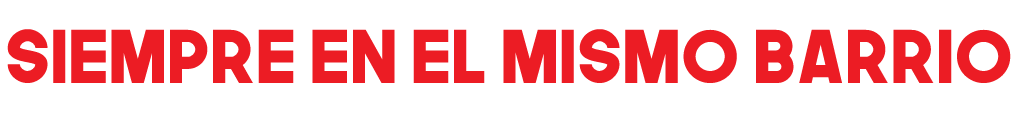
<style>
.page{position:relative;width:1019px;height:113px;background:#ffffff}
.page>*{position:absolute;margin:0}
.t1{font:72px "TheNextFont";letter-spacing:0.005em;color:#ec1c24}
</style>
<div class="page">
<p class="t1" style="left:7px;top:29px;width:1004px;height:54px">SIEMPRE EN EL MISMO BARRIO</p>
</div>
